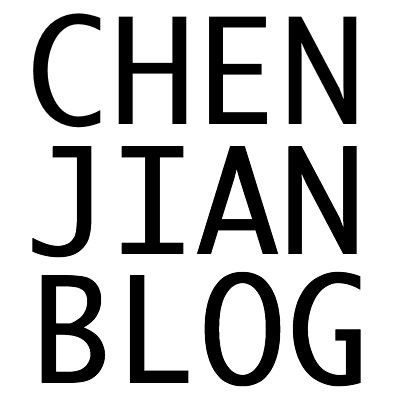
<style>
.page{position:relative;width:400px;height:400px;background:#ffffff}
.page>*{position:absolute;margin:0}
.t1{font:141.7px "MonacoForPowerline";color:#000000}
</style>
<div class="page">
<p class="t1" style="left:33px;top:13px;width:324px;height:115px">CHEN</p>
<p class="t1" style="left:32px;top:146px;width:325px;height:112px">JIAN</p>
<p class="t1" style="left:41px;top:271px;width:320px;height:116px">BLOG</p>
</div>
